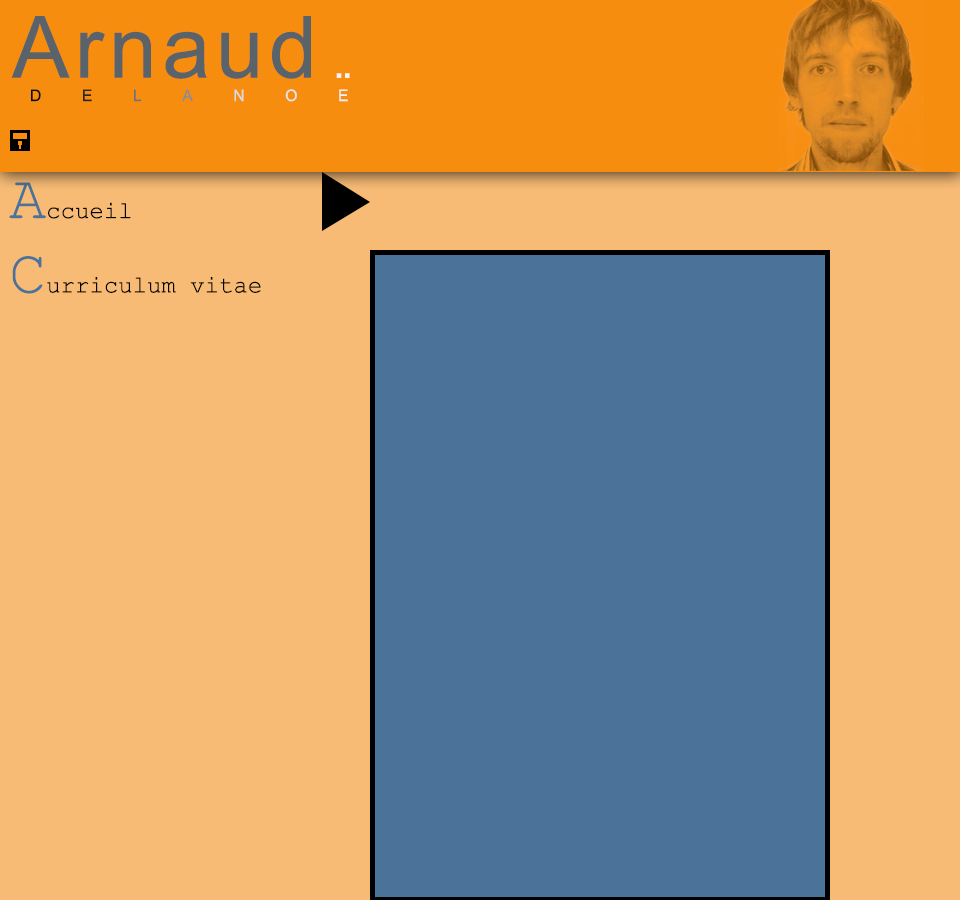
<style>
.page{position:relative;width:960px;height:900px;background:#f7bb75}
.page>*{position:absolute;margin:0}
.t1{font:86px "ArialMT";color:#5b636a}
.t2{font:45px "ArialMT";color:#f3f2f2}
.t3{font:16px "ArialMT";color:#0d0d0d}
.t4{font:16px "ArialMT";color:#262626}
.t5{font:16px "ArialMT";color:#727272}
.t6{font:16px "ArialMT";color:#8b8b8b}
.t7{font:16px "ArialMT";color:#dadada}
.t8{font:16px "ArialMT";color:#e5e5e5}
.t9{font:16px "ArialMT";color:#f0f0f0}
.t10{font:24px "CourierNewPSMT";color:#000000}
.t11{font:62px "CourierNewPSMT";color:#4b7299}
</style>
<div class="page">
<p class="t1" style="left:11px;top:16px;width:300px;height:63px">Arnaud</p>
<p class="t2" style="left:336px;top:73px;width:14px;height:5px">¨</p>
<p class="t3" style="left:31px;top:89px;width:317px;height:13px">D<span class="t4">E</span><span class="t5">L</span><span class="t6">A</span><span class="t7">N</span><span class="t8">O</span><span class="t9">E</span></p>
<p class="t10" style="left:9px;top:182px;width:252px;height:112px"><span class="t11">A</span>ccueil<br><span class="t11">C</span>urriculum vitae</p>
</div>
